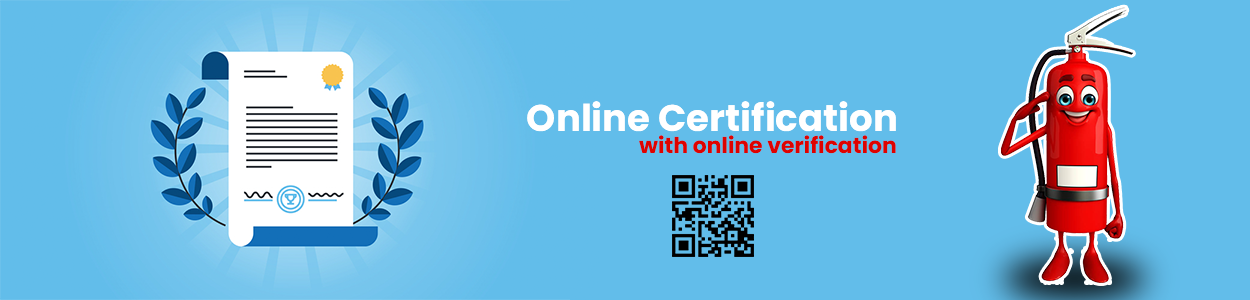
<style>
.page{position:relative;width:1250px;height:300px;background:#62bdea}
.page>*{position:absolute;margin:0}
.t1{font:37.1px "Poppins-Bold";color:#ffffff}
.t2{font:21.9px "Poppins-Bold";color:#de0300}
</style>
<div class="page">
<p class="t1" style="left:527px;top:101px;width:369px;height:31px">Online Certification</p>
<p class="t2" style="left:639px;top:135px;width:257px;height:19px">with online verification</p>
</div>
